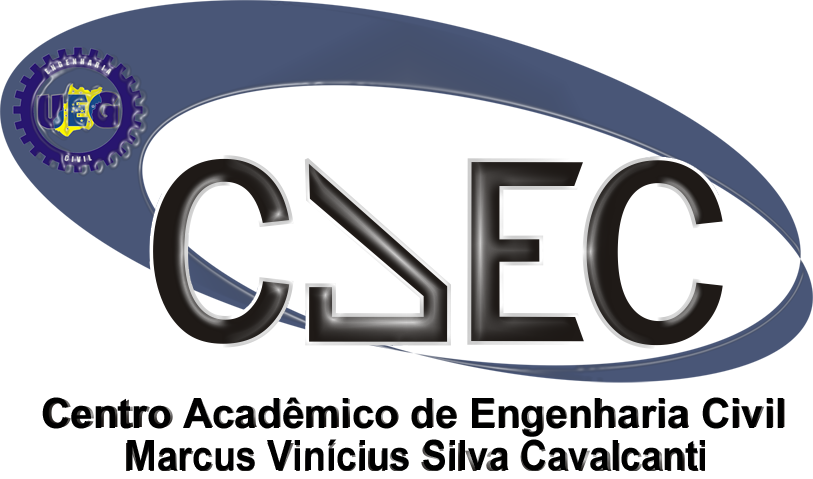
<style>
.page{position:relative;width:813px;height:479px;background:#ffffff}
.page>*{position:absolute;margin:0}
.t1{font:41.7px "Arial-BoldMT";color:#000000}
.t2{font:41.7px "Arial-BoldMT";color:#000000;scale:0.9 1}
</style>
<div class="page">
<p class="t1" style="left:42px;top:397px;width:742px;height:40px">Centro Acadêmico de Engenharia Civil</p>
<p class="t2" style="left:127px;top:439px;width:578px;height:32px">Marcus Vinícius Silva Cavalcanti</p>
</div>
